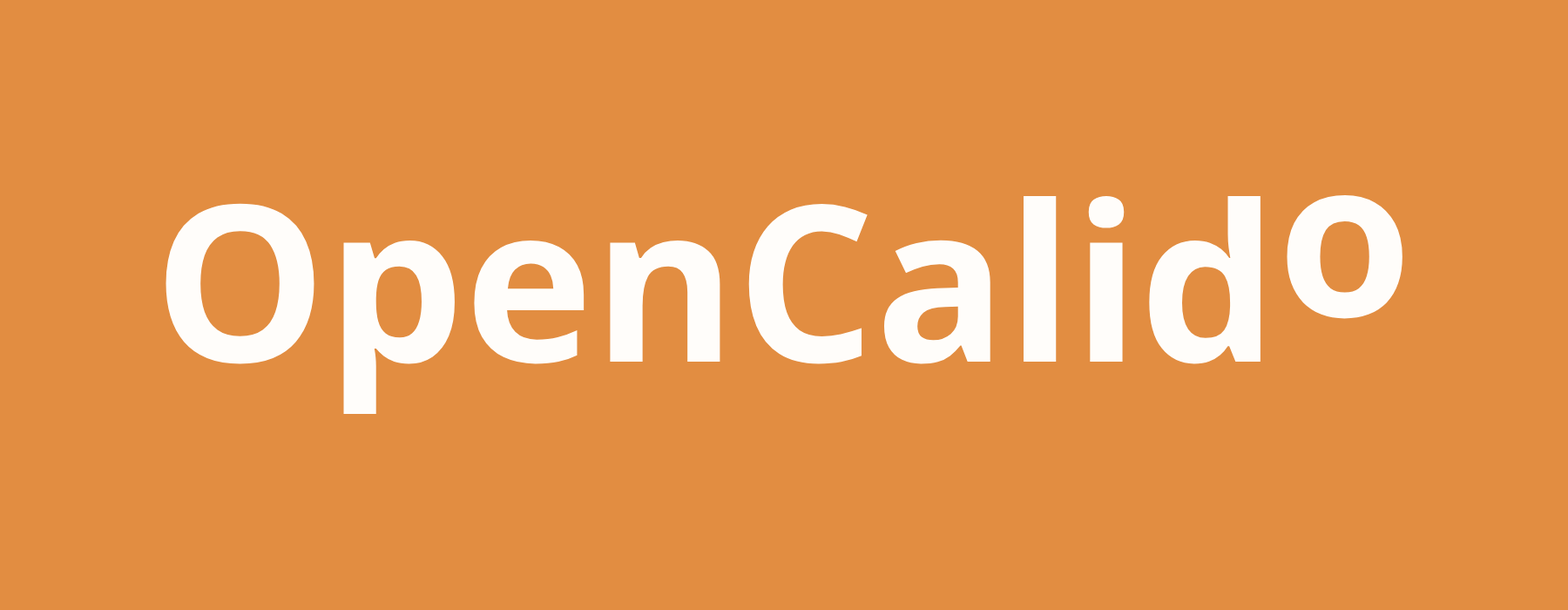
<style>
.page{position:relative;width:1568px;height:610px;background:#e28d41}
.page>*{position:absolute;margin:0}
.t1{font:217.8px "OpenSans-Bold";color:#ffffff}
.t2{font:217.8px "OpenSans-Bold";letter-spacing:0.1em;color:#ffffff}
</style>
<div class="page">
<p class="t1" style="left:166px;top:194px;width:1236px;height:221px">OpenCalid<span class="t2">o</span></p>
</div>
